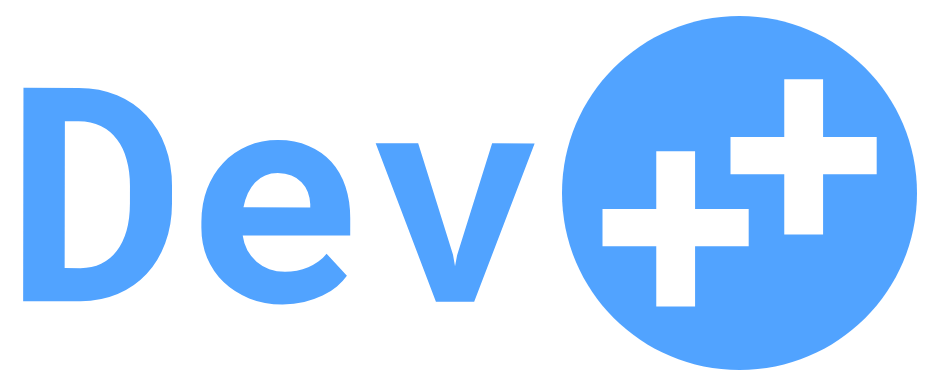
<style>
.page{position:relative;width:940px;height:386px;background:#ffffff}
.page>*{position:absolute;margin:0}
.t1{font:300px "RobotoMono-Bold";color:#51a3ff}
</style>
<div class="page">
<p class="t1" style="left:23px;top:87px;width:512px;height:218px">Dev</p>
</div>
